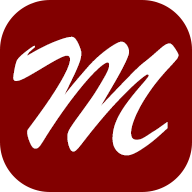
<style>
.page{position:relative;width:192px;height:192px;background:#820000}
.page>*{position:absolute;margin:0}
.t1{font:173.3px "BrushScriptMT";color:#ffffff}
</style>
<div class="page">
<p class="t1" style="left:13px;top:36px;width:166px;height:120px">M</p>
</div>
